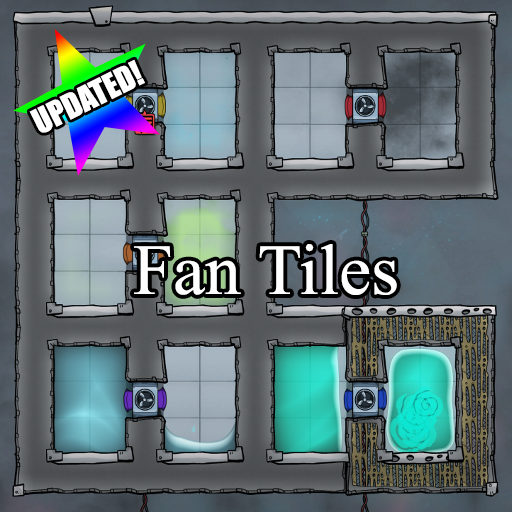
<style>
.page{position:relative;width:512px;height:512px}
.page>*{position:absolute;margin:0}
.t1{font:31.8px "Impact";color:#ffffff}
.t2{font:72px "TimesNewRomanPSMT";color:#ffffff}
</style>
<div class="page">
<p class="t1" style="left:29px;top:59px;width:116px;height:74px;rotate:-26deg">UPDATED!</p>
<p class="t2" style="left:134px;top:244px;width:263px;height:51px">Fan Tiles</p>
</div>
